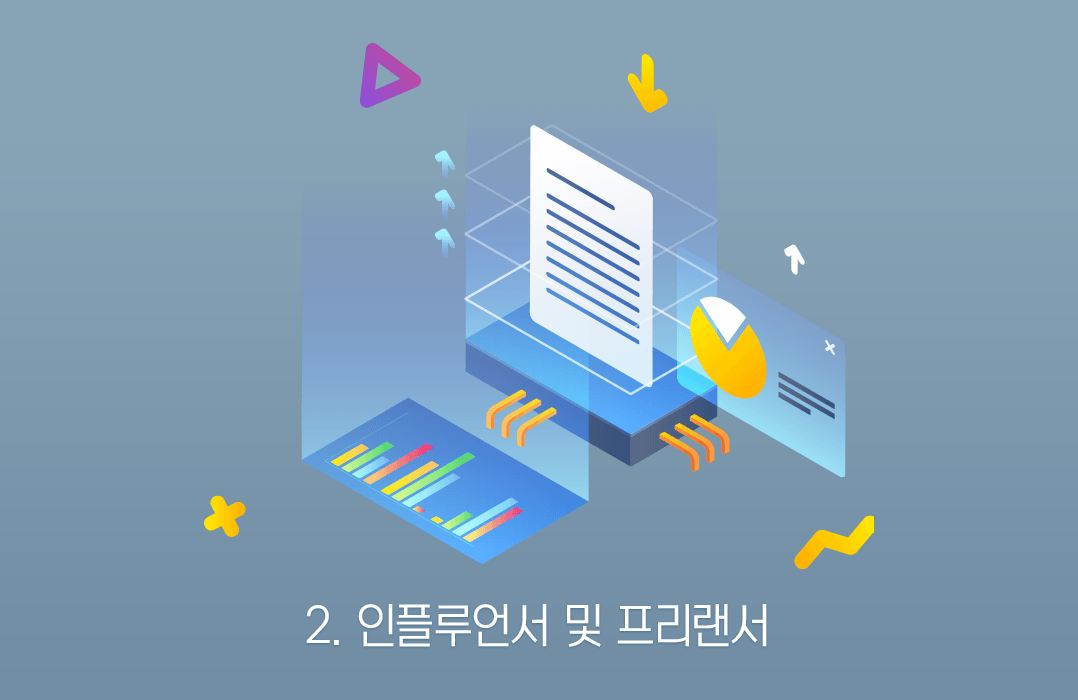
<style>
.page{position:relative;width:1078px;height:700px}
.page>*{position:absolute;margin:0}
.t1{font:48px "YoonMeolijeongche2L";color:#ffffff}
</style>
<div class="page">
<p class="t1" style="left:306px;top:604px;width:461px;height:43px">2. 인플루언서 및 프리랜서</p>
</div>
